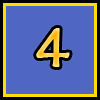
<style>
.page{position:relative;width:100px;height:100px;background:#4f67c3}
.page>*{position:absolute;margin:0}
.t1{font:60px "Herculanum";font-weight:bold}
</style>
<div class="page">
<p class="t1" style="left:36px;top:28px;width:34px;height:39px">4</p>
</div>
